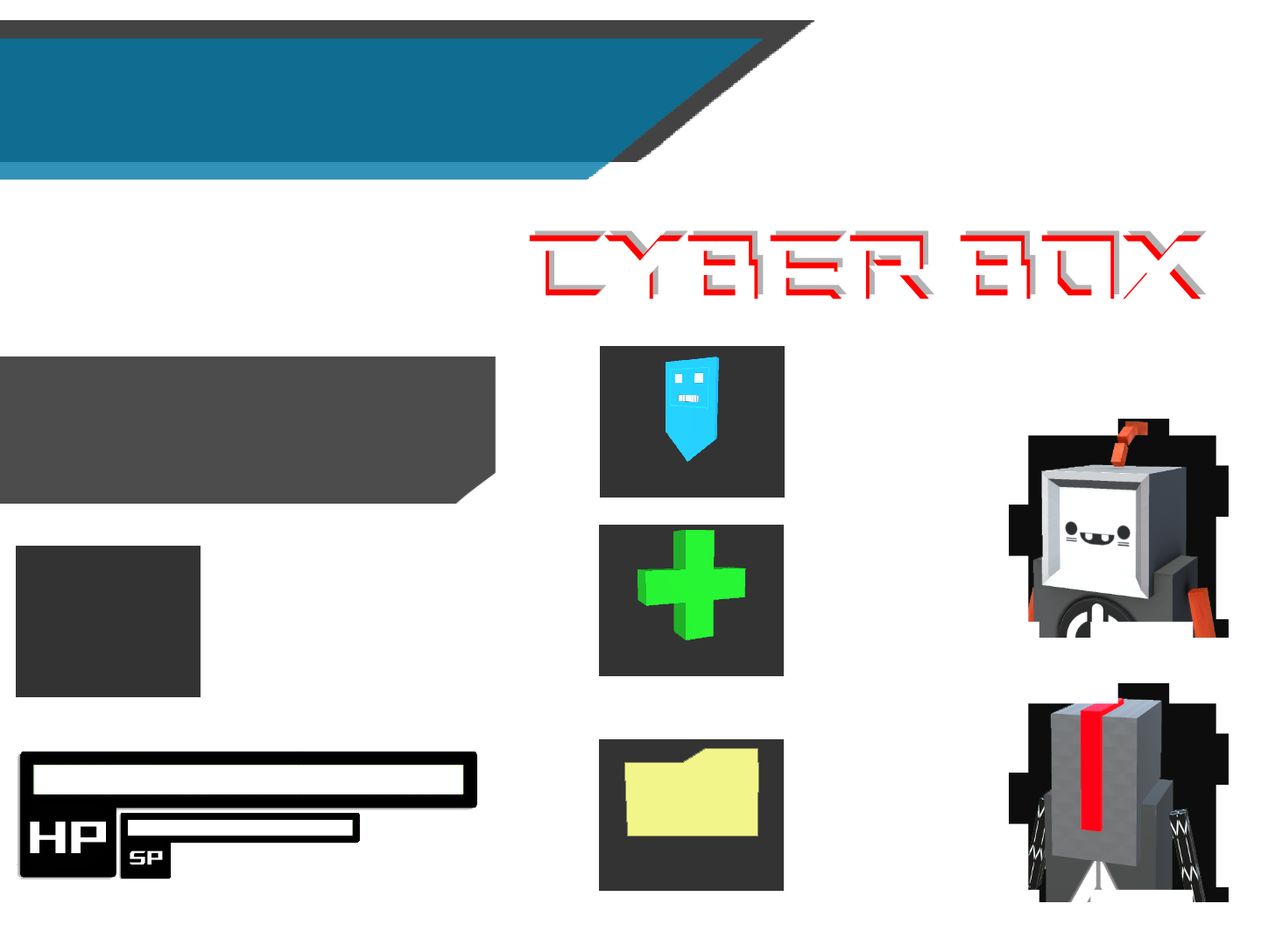
<style>
.page{position:relative;width:1261px;height:946px;background:#ffffff}
.page>*{position:absolute;margin:0}
.t1{font:145.9px "ROGFontsv1.6-Regular"}
.t2{font:145.9px "ROGFontsv1.6-Regular";color:#ffffff}
.t3{font:72.2px "ROGFontsv1.6-Regular";color:#ffffff}
.t4{font:30.8px "ROGFontsv1.6-Regular";color:#ffffff}
</style>
<div class="page">
<p class="t1" style="left:534px;top:230px;width:673px;height:65px">CYBER BOX</p>
<p class="t2" style="left:525px;top:241px;width:673px;height:65px">CYBER BOX</p>
<p class="t1" style="left:529px;top:235px;width:672px;height:64px">CYBER BOX</p>
<p class="t3" style="left:30px;top:821px;width:76px;height:32px">hP</p>
<p class="t4" style="left:130px;top:850px;width:33px;height:14px">SP</p>
</div>
